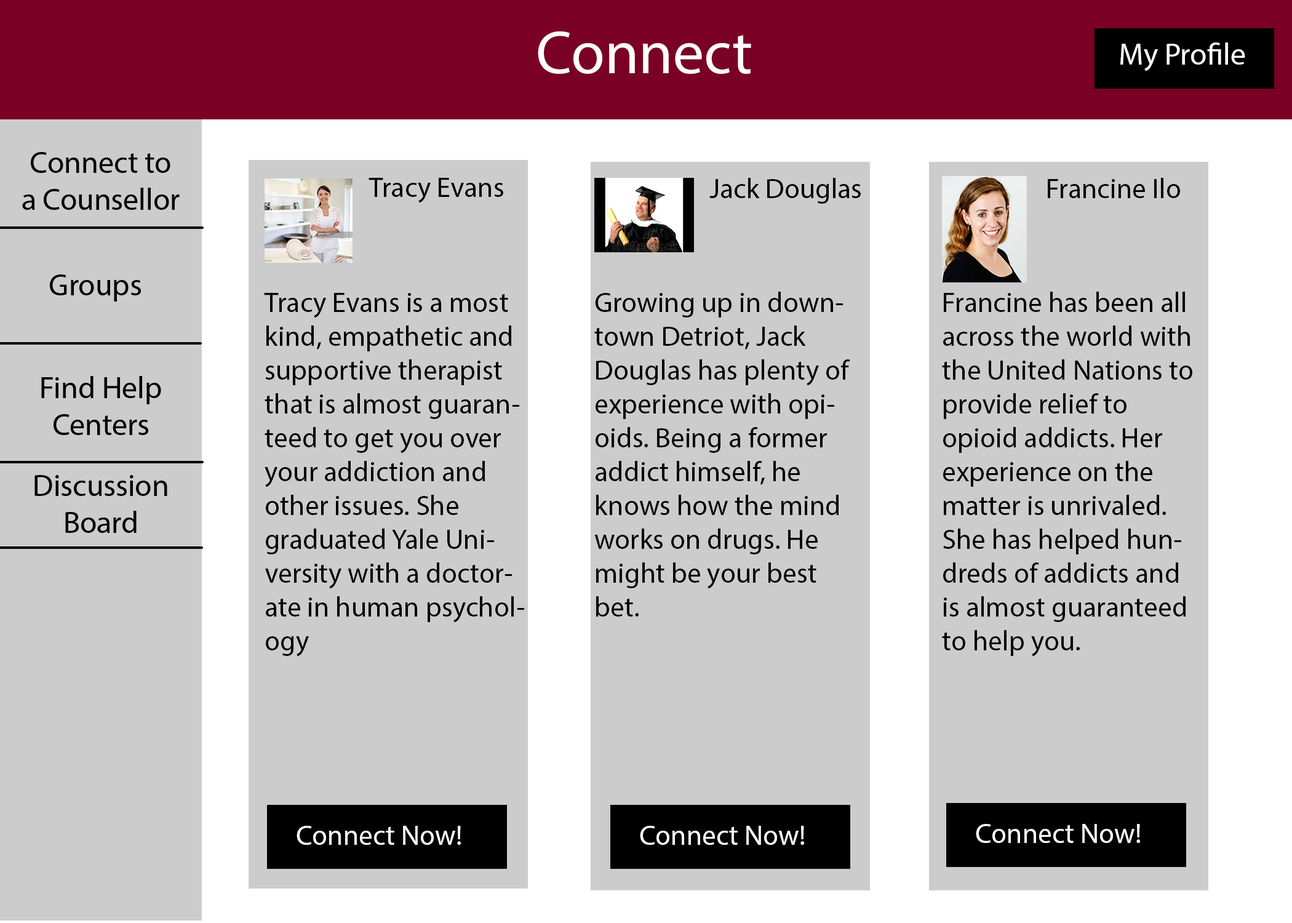
<style>
.page{position:relative;width:1292px;height:923px;background:#cccccc}
.page>*{position:absolute;margin:0}
.t1{font:61.5px "MyriadPro-Regular";color:#ffffff}
.t2{font:30.8px "MyriadPro-Regular";color:#fefefe}
.t3{font:28.2px "MyriadPro-Regular";color:#000000}
.t4{font:28.2px "MyriadPro-Regular";color:#ffffff}
</style>
<div class="page">
<p class="t1" style="left:538px;top:31px;width:213px;height:43px">Connect</p>
<p class="t2" style="left:1120px;top:42px;width:125px;height:29px">My Profile</p>
<p class="t3" style="left:369px;top:178px;width:134px;height:25px">Tracy Evans</p>
<p class="t3" style="left:709px;top:178px;width:152px;height:26px">Jack Douglas</p>
<p class="t3" style="left:1048px;top:178px;width:132px;height:20px">Francine Ilo</p>
<p class="t3" style="left:264px;top:293px;width:260px;height:363px">Tracy Evans is a most kind, empathetic and supportive therapist that is almost guaranteed to get you over your addiction and other issues. She graduated Yale University with a doctorate in human psychology</p>
<p class="t3" style="left:594px;top:292px;width:256px;height:324px">Growing up in downtown Detriot, Jack Douglas has plenty of experience with opioids. Being a former addict himself, he knows how the mind works on drugs. He might be your best bet.</p>
<p class="t3" style="left:942px;top:292px;width:250px;height:364px">Francine has been all across the world with the United Nations to provide relief to opioid addicts. Her experience on the matter is unrivaled. She has helped hundreds of addicts and is almost guaranteed to help you.</p>
<p class="t4" style="left:297px;top:826px;width:164px;height:19px">Connect Now!</p>
<p class="t4" style="left:640px;top:826px;width:164px;height:19px">Connect Now!</p>
<p class="t4" style="left:976px;top:824px;width:164px;height:19px">Connect Now!</p>
</div>
